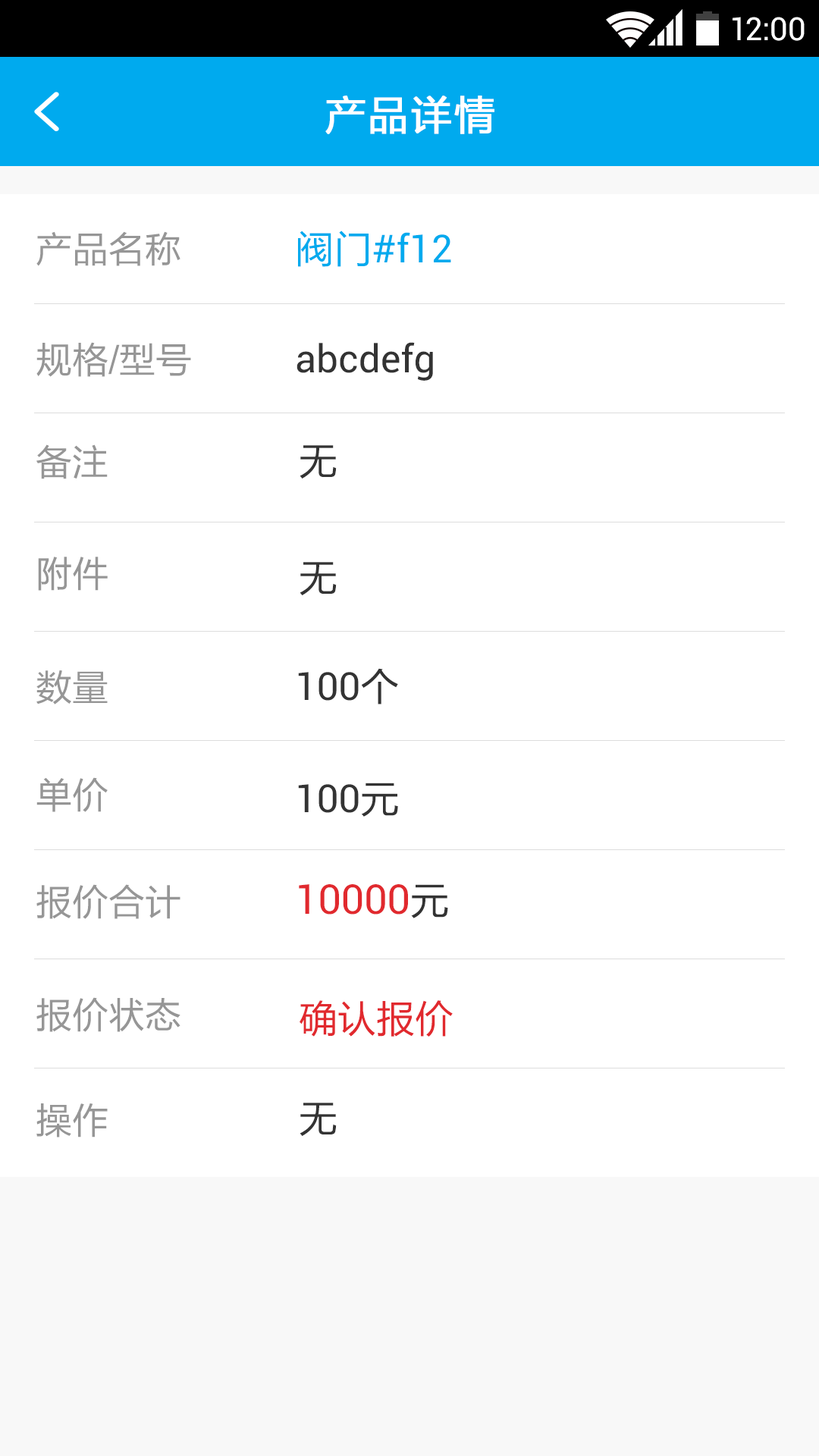
<style>
.page{position:relative;width:819px;height:1456px;background:#ffffff}
.page>*{position:absolute;margin:0}
.t1{font:31.9px "Roboto-Regular";color:#ffffff}
.t2{font:40.9px "FZLTHJW--GB1-0";letter-spacing:0.02em;color:#ffffff;font-weight:bold}
.t3{font:36.4px "FZLTHJW--GB1-0";color:#969696}
.t4{font:38.7px "Roboto-Regular";color:#00aaee}
.t5{font:38.7px "FZLTHJW--GB1-0";color:#00aaee}
.t6{font:38.7px "Roboto-Regular";color:#333333}
.t7{font:38.7px "FZLTHJW--GB1-0";color:#333333}
.t8{font:40.9px "Roboto-Regular";color:#e1292e}
.t9{font:38.7px "FZLTHJW--GB1-0";color:#e1292e}
</style>
<div class="page">
<p class="t1" style="left:733px;top:17px;width:72px;height:24px">12:00</p>
<p class="t2" style="left:325px;top:96px;width:169px;height:38px">产品详情</p>
<p class="t3" style="left:36px;top:231px;width:144px;height:35px">产品名称</p>
<p class="t4" style="left:298px;top:231px;width:153px;height:36px"><span class="t5">阀门</span>#f12</p>
<p class="t3" style="left:36px;top:342px;width:155px;height:35px">规格/型号</p>
<p class="t6" style="left:297px;top:342px;width:136px;height:39px">abcdefg</p>
<p class="t3" style="left:36px;top:444px;width:72px;height:35px">备注</p>
<p class="t7" style="left:300px;top:445px;width:37px;height:34px">无</p>
<p class="t3" style="left:38px;top:557px;width:70px;height:34px">附件</p>
<p class="t7" style="left:300px;top:562px;width:37px;height:33px">无</p>
<p class="t3" style="left:36px;top:670px;width:72px;height:34px">数量</p>
<p class="t6" style="left:298px;top:668px;width:100px;height:36px">100<span class="t7">个</span></p>
<p class="t3" style="left:36px;top:777px;width:72px;height:35px">单价</p>
<p class="t6" style="left:298px;top:783px;width:100px;height:34px">100<span class="t7">元</span></p>
<p class="t3" style="left:36px;top:884px;width:144px;height:35px">报价合计</p>
<p class="t8" style="left:299px;top:884px;width:149px;height:34px">10000<span class="t7">元</span></p>
<p class="t3" style="left:36px;top:997px;width:144px;height:35px">报价状态</p>
<p class="t9" style="left:300px;top:1000px;width:153px;height:37px">确认报价</p>
<p class="t3" style="left:36px;top:1103px;width:72px;height:34px">操作</p>
<p class="t7" style="left:300px;top:1103px;width:37px;height:33px">无</p>
</div>
